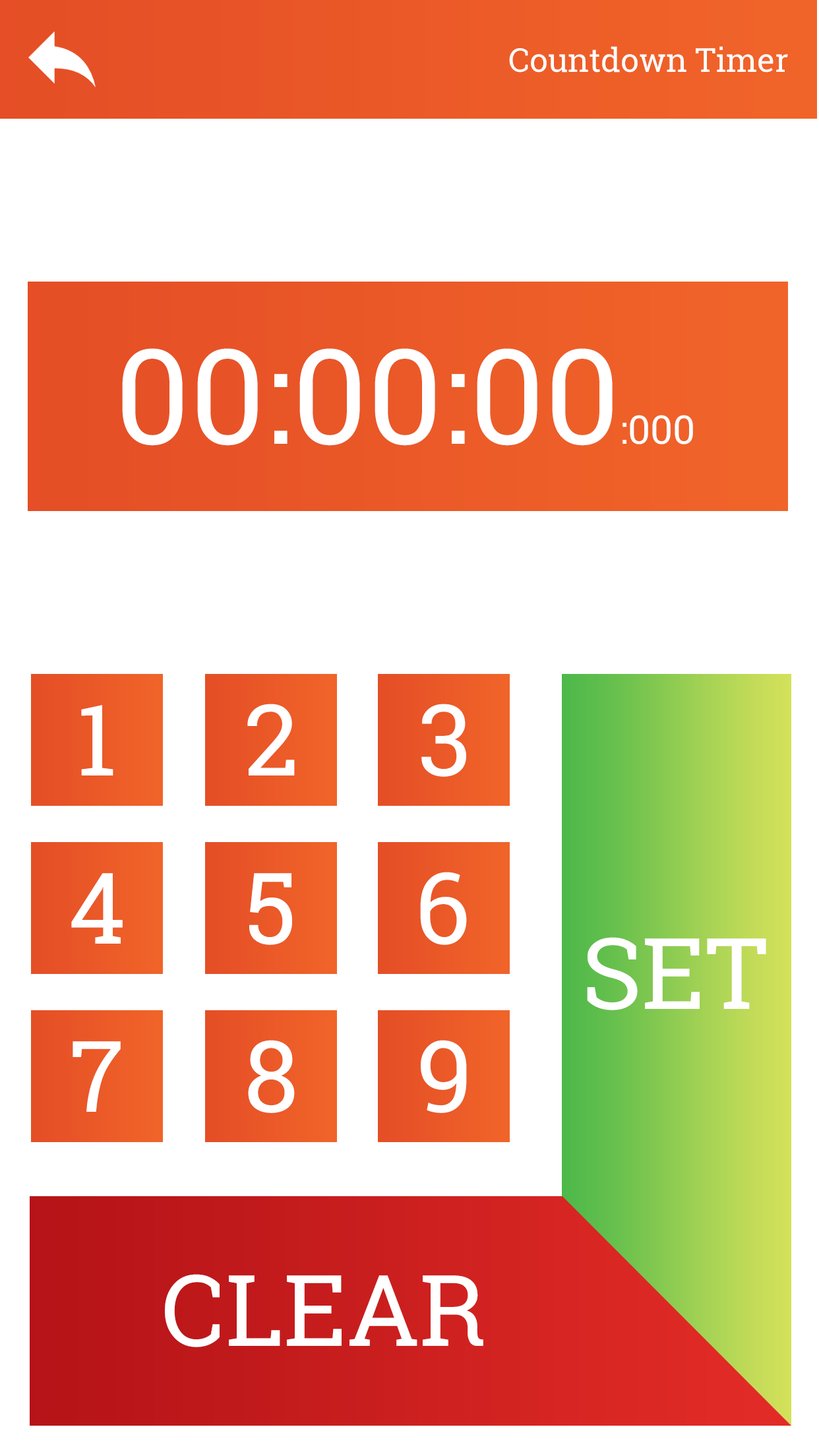
<style>
.page{position:relative;width:819px;height:1456px;background:#ffffff}
.page>*{position:absolute;margin:0}
.t1{font:33px "RobotoSlab-Regular";color:#ffffff}
.t2{font:131.9px "RobotoSlab-Regular";color:#ffffff}
.t3{font:39.6px "RobotoSlab-Regular";color:#ffffff}
.t4{font:98.9px "RobotoSlab-Regular";color:#ffffff}
</style>
<div class="page">
<p class="t1" style="left:509px;top:46px;width:279px;height:27px">Countdown Timer</p>
<p class="t2" style="left:122px;top:348px;width:571px;height:98px">00:00:00<span class="t3">:000</span></p>
<p class="t4" style="left:81px;top:705px;width:32px;height:70px">1</p>
<p class="t4" style="left:247px;top:704px;width:48px;height:71px">2</p>
<p class="t4" style="left:421px;top:704px;width:45px;height:73px">3</p>
<p class="t4" style="left:71px;top:873px;width:52px;height:71px">4</p>
<p class="t4" style="left:249px;top:873px;width:43px;height:72px">5</p>
<p class="t4" style="left:420px;top:872px;width:47px;height:73px">6</p>
<p class="t4" style="left:587px;top:937px;width:179px;height:73px">SET</p>
<p class="t4" style="left:73px;top:1041px;width:48px;height:71px">7</p>
<p class="t4" style="left:248px;top:1040px;width:47px;height:73px">8</p>
<p class="t4" style="left:421px;top:1040px;width:46px;height:73px">9</p>
<p class="t4" style="left:165px;top:1274px;width:318px;height:73px">CLEAR</p>
</div>
